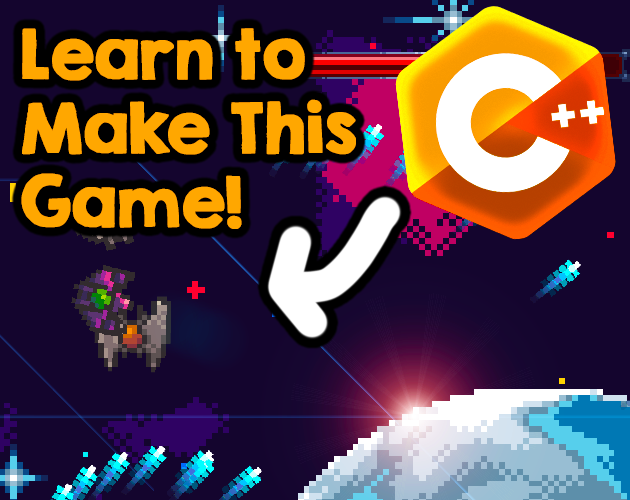
<style>
.page{position:relative;width:630px;height:500px;background:#14052e}
.page>*{position:absolute;margin:0}
.t1{font:61.5px "KGSecondChancesSolid";color:#ffb400;font-weight:bold}
</style>
<div class="page">
<p class="t1" style="left:21px;top:28px;width:335px;height:201px">Learn to<br>Make This<br>Game!</p>
</div>
